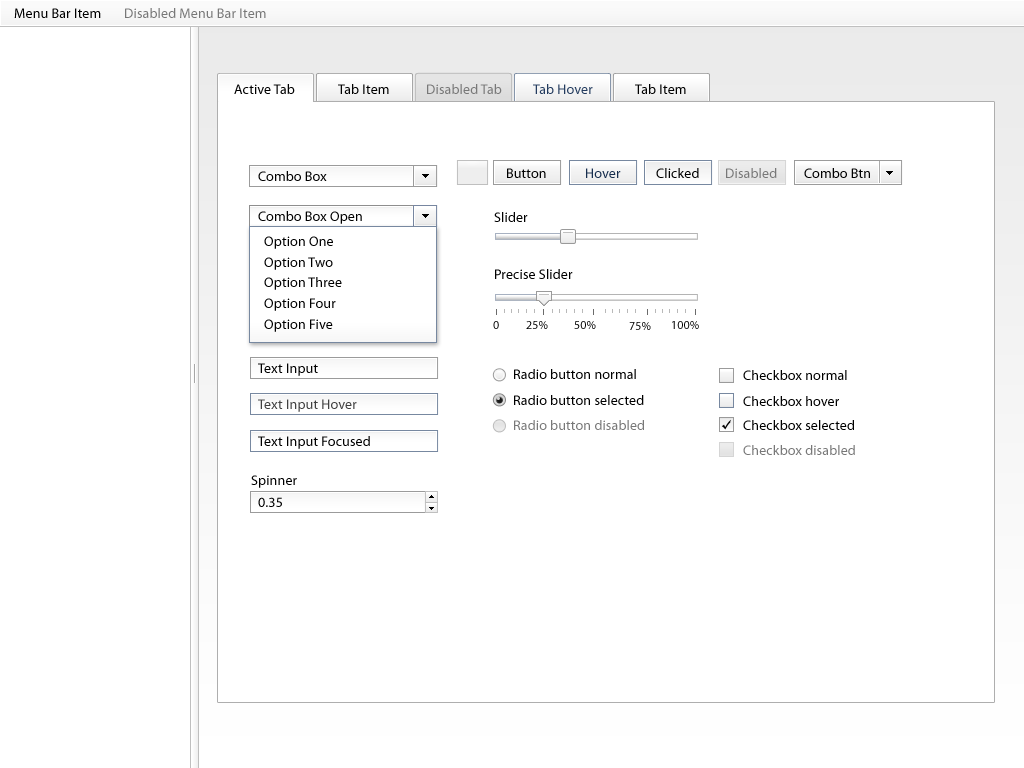
<style>
.page{position:relative;width:1024px;height:768px;background:#ffffff}
.page>*{position:absolute;margin:0}
.t1{font:14px "MyriadPro-Regular";letter-spacing:0.01em;color:#000000}
.t2{font:14px "MyriadPro-Regular";letter-spacing:0.01em;color:#787878}
.t3{font:14px "MyriadPro-Regular";letter-spacing:0.01em;color:#243c5f}
.t4{font:14px "MyriadPro-Regular";letter-spacing:0.01em;color:#172e4e}
.t5{font:12px "MyriadPro-Regular";letter-spacing:0.01em}
.t6{font:12px "MyriadPro-Regular";letter-spacing:0.01em;color:#000000}
.t7{font:14px "MyriadPro-Regular";letter-spacing:0.01em;color:#404040}
</style>
<div class="page">
<p class="t1" style="left:14px;top:8px;width:87px;height:10px">Menu Bar Item</p>
<p class="t2" style="left:125px;top:8px;width:141px;height:10px">Disabled Menu Bar Item</p>
<p class="t1" style="left:234px;top:84px;width:61px;height:10px">Active Tab</p>
<p class="t1" style="left:338px;top:84px;width:51px;height:10px">Tab Item</p>
<p class="t2" style="left:427px;top:84px;width:75px;height:10px">Disabled Tab</p>
<p class="t3" style="left:533px;top:84px;width:60px;height:10px">Tab Hover</p>
<p class="t1" style="left:635px;top:84px;width:51px;height:10px">Tab Item</p>
<p class="t1" style="left:258px;top:171px;width:69px;height:10px">Combo Box</p>
<p class="t1" style="left:507px;top:168px;width:39px;height:10px">Button</p>
<p class="t4" style="left:586px;top:168px;width:35px;height:10px">Hover</p>
<p class="t1" style="left:656px;top:168px;width:43px;height:10px">Clicked</p>
<p class="t2" style="left:726px;top:168px;width:51px;height:10px">Disabled</p>
<p class="t1" style="left:804px;top:168px;width:66px;height:10px">Combo Btn</p>
<p class="t1" style="left:258px;top:211px;width:104px;height:13px">Combo Box Open</p>
<p class="t1" style="left:494px;top:212px;width:34px;height:10px">Slider</p>
<p class="t1" style="left:264px;top:236px;width:69px;height:13px">Option One</p>
<p class="t1" style="left:264px;top:257px;width:69px;height:13px">Option Two</p>
<p class="t1" style="left:495px;top:269px;width:78px;height:10px">Precise Slider</p>
<p class="t1" style="left:264px;top:277px;width:78px;height:13px">Option Three</p>
<p class="t1" style="left:264px;top:298px;width:72px;height:13px">Option Four</p>
<p class="t1" style="left:264px;top:319px;width:69px;height:13px">Option Five</p>
<p class="t5" style="left:493px;top:321px;width:6px;height:8px">0</p>
<p class="t6" style="left:526px;top:321px;width:22px;height:8px">25%</p>
<p class="t6" style="left:574px;top:321px;width:22px;height:8px">50%</p>
<p class="t5" style="left:629px;top:322px;width:22px;height:8px">75%</p>
<p class="t6" style="left:672px;top:321px;width:27px;height:8px">100%</p>
<p class="t1" style="left:258px;top:363px;width:60px;height:13px">Text Input</p>
<p class="t1" style="left:514px;top:369px;width:122px;height:10px">Radio button normal</p>
<p class="t1" style="left:743px;top:370px;width:104px;height:10px">Checkbox normal</p>
<p class="t7" style="left:258px;top:399px;width:99px;height:13px">Text Input Hover</p>
<p class="t1" style="left:514px;top:395px;width:130px;height:10px">Radio button selected</p>
<p class="t1" style="left:743px;top:396px;width:96px;height:10px">Checkbox hover</p>
<p class="t2" style="left:514px;top:420px;width:130px;height:10px">Radio button disabled</p>
<p class="t1" style="left:743px;top:420px;width:111px;height:10px">Checkbox selected</p>
<p class="t1" style="left:258px;top:436px;width:112px;height:13px">Text Input Focused</p>
<p class="t2" style="left:743px;top:445px;width:112px;height:10px">Checkbox disabled</p>
<p class="t1" style="left:251px;top:475px;width:46px;height:13px">Spinner</p>
<p class="t1" style="left:258px;top:497px;width:24px;height:10px">0.35</p>
</div>
